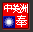
<style>
.page{position:relative;width:33px;height:32px;background:#f20000}
.page>*{position:absolute;margin:0}
.t1{font:10.4px "SimSun";letter-spacing:-0.25em;color:#ffffff}
.t2{font:11.7px "SimSun";color:#ffffff}
</style>
<div class="page">
<p class="t1" style="left:4px;top:4px;width:24px;height:9px">中美洲</p>
<p class="t2" style="left:16px;top:15px;width:11px;height:12px">奉</p>
</div>
